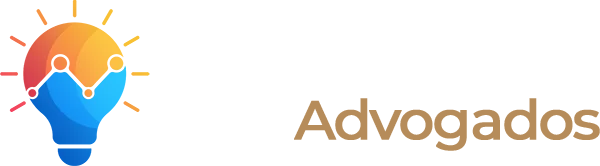
<style>
.page{position:relative;width:600px;height:166px;background:#ffffff}
.page>*{position:absolute;margin:0}
.t1{font:54.8px "Montserrat-Medium";letter-spacing:-0.05em;color:#b68c5a;font-weight:bold}
.t2{font:54.8px "Montserrat-Medium";letter-spacing:-0.05em;color:#ffffff;font-weight:bold}
</style>
<div class="page">
<p class="t1" style="left:164px;top:98px;width:436px;height:53px"><span class="t2">Para </span>Advogados</p>
</div>
